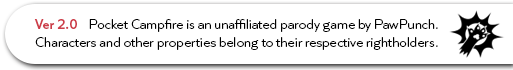
<style>
.page{position:relative;width:513px;height:70px;background:#ffffff}
.page>*{position:absolute;margin:0}
.t1{font:14px "QuietSans-SemiBold";color:#cd3d49}
.t2{font:14px/18px "QuietSans-Light";color:#000000}
</style>
<div class="page">
<p class="t1" style="left:34px;top:19px;width:43px;height:10px">Ver 2.0</p>
<p class="t2" style="left:35px;top:19px;width:403px;height:31px;text-align:right">Pocket Campfire is an unaffiliated parody game by PawPunch.<br>Characters and other properties belong to their respective rightholders.</p>
</div>
